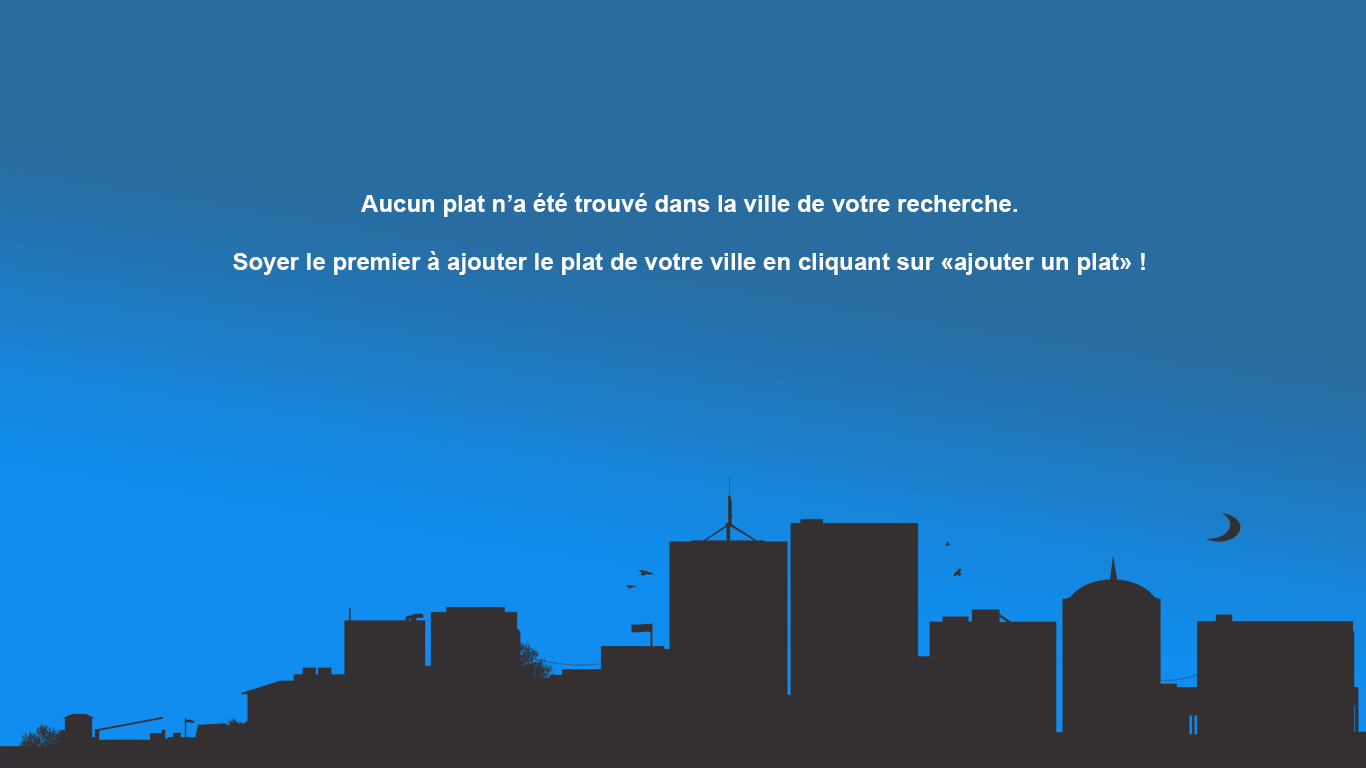
<style>
.page{position:relative;width:1366px;height:768px;background:#296ca0}
.page>*{position:absolute;margin:0}
.t1{font:24px "Arial-BoldMT";color:#ffffff}
</style>
<div class="page">
<p class="t1" style="left:233px;top:193px;width:912px;height:82px;text-align:center">Aucun plat n’a été trouvé dans la ville de votre recherche.<br><br>Soyer le premier à ajouter le plat de votre ville en cliquant sur «ajouter un plat» !</p>
</div>
